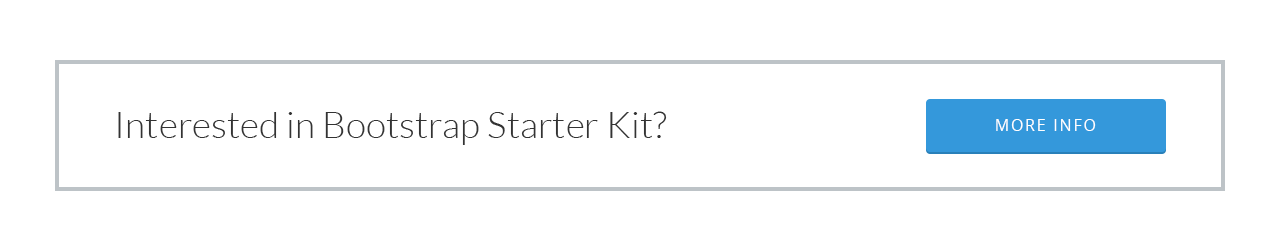
<style>
.page{position:relative;width:1280px;height:251px;background:#ffffff}
.page>*{position:absolute;margin:0}
.t1{font:37px "Lato-Light";color:#333333}
.t2{font:16px "OpenSans";letter-spacing:0.11em;color:#ffffff}
</style>
<div class="page">
<p class="t1" style="left:118px;top:111px;width:549px;height:34px">Interested in Bootstrap Starter Kit?</p>
<p class="t2" style="left:996px;top:119px;width:100px;height:12px">MORE INFO</p>
</div>
